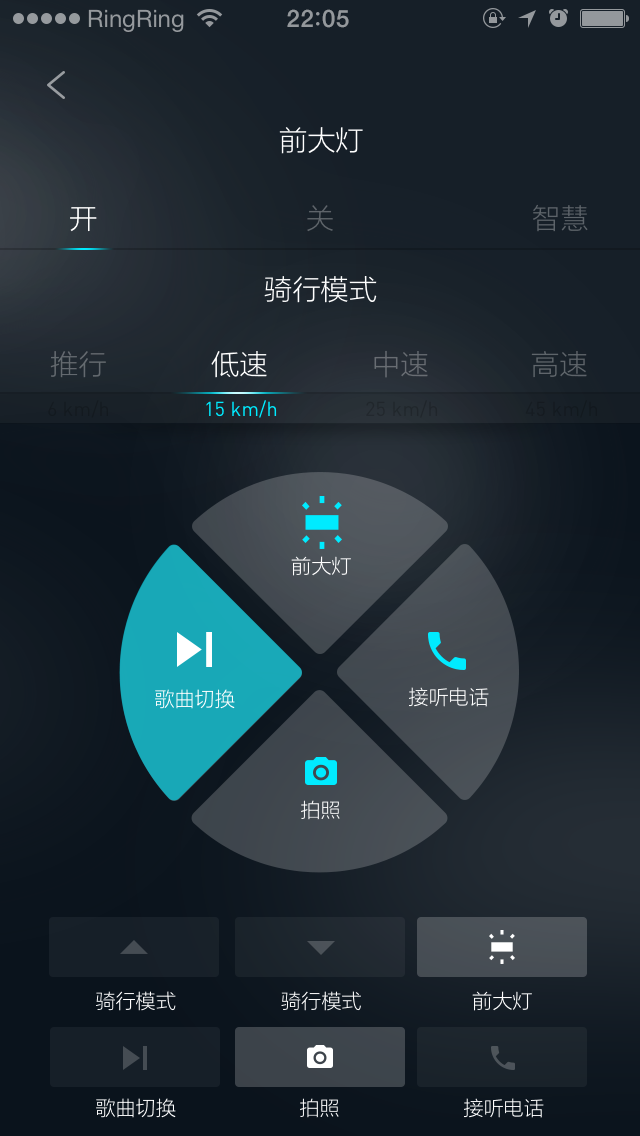
<style>
.page{position:relative;width:640px;height:1136px}
.page>*{position:absolute;margin:0}
.t1{font:24px "HelveticaNeue";color:#95999d}
.t2{font:24px "HelveticaNeue-Medium";letter-spacing:0.03em;color:#94989c}
.t3{font:28px "FZLTXHK--GBK1-0";letter-spacing:0.01em;color:#ffffff}
.t4{font:28px "FZLTXHK--GBK1-0";letter-spacing:0.01em;color:#5e646a}
.t5{font:28px "FZLTXHK--GBK1-0";letter-spacing:0.01em;color:#5c6369}
.t6{font:28px "FZLTXHK--GBK1-0";letter-spacing:0.01em;color:#63696f}
.t7{font:28px "FZLTXHK--GBK1-0";letter-spacing:0.01em;color:#686c73}
.t8{font:28px "FZLTXHK--GBK1-0";letter-spacing:0.01em;color:#5e656a}
.t9{font:20px "DINPro-Regular";letter-spacing:0.01em;color:#131a1f}
.t10{font:20px "DINPro-Regular";letter-spacing:0.01em;color:#00ebff}
.t11{font:20px "DINPro-Regular";letter-spacing:0.01em;color:#20262b}
.t12{font:20px "DINPro-Regular";letter-spacing:0.01em;color:#12191f}
.t13{font:20px "FZLTXHK--GBK1-0";letter-spacing:0.01em;color:#ffffff}
</style>
<div class="page">
<p class="t1" style="left:88px;top:9px;width:96px;height:23px">RingRing</p>
<p class="t2" style="left:287px;top:9px;width:62px;height:19px">22 05</p>
<p class="t3" style="left:279px;top:127px;width:84px;height:27px">前大灯</p>
<p class="t3" style="left:70px;top:207px;width:27px;height:25px">开</p>
<p class="t4" style="left:307px;top:205px;width:26px;height:27px">关</p>
<p class="t5" style="left:533px;top:204px;width:55px;height:28px">智慧</p>
<p class="t3" style="left:264px;top:276px;width:113px;height:27px">骑行模式</p>
<p class="t6" style="left:50px;top:351px;width:56px;height:27px">推行</p>
<p class="t3" style="left:211px;top:351px;width:56px;height:27px">低速</p>
<p class="t7" style="left:374px;top:350px;width:54px;height:28px">中速</p>
<p class="t8" style="left:531px;top:351px;width:56px;height:27px">高速</p>
<p class="t9" style="left:48px;top:400px;width:61px;height:18px">6 km/h</p>
<p class="t10" style="left:206px;top:400px;width:71px;height:18px">15 km/h</p>
<p class="t11" style="left:366px;top:400px;width:72px;height:18px">25 km/h</p>
<p class="t12" style="left:525px;top:400px;width:73px;height:18px">45 km/h</p>
<p class="t13" style="left:291px;top:556px;width:60px;height:20px">前大灯</p>
<p class="t13" style="left:155px;top:689px;width:80px;height:20px">歌曲切换</p>
<p class="t13" style="left:409px;top:687px;width:80px;height:20px">接听电话</p>
<p class="t13" style="left:301px;top:800px;width:39px;height:20px">拍照</p>
<p class="t13" style="left:96px;top:991px;width:80px;height:20px">骑行模式</p>
<p class="t13" style="left:281px;top:991px;width:80px;height:20px">骑行模式</p>
<p class="t13" style="left:472px;top:991px;width:60px;height:20px">前大灯</p>
<p class="t13" style="left:96px;top:1098px;width:80px;height:20px">歌曲切换</p>
<p class="t13" style="left:300px;top:1098px;width:39px;height:20px">拍照</p>
<p class="t13" style="left:464px;top:1098px;width:80px;height:20px">接听电话</p>
</div>
